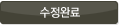
<style>
.page{position:relative;width:120px;height:25px;background:#444337}
.page>*{position:absolute;margin:0}
.t1{font:12.1px "YDIYGO330";color:#ffffff;scale:0.91 1}
</style>
<div class="page">
<p class="t1" style="left:40px;top:7px;width:40px;height:11px">수정완료</p>
</div>
